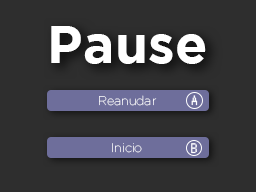
<style>
.page{position:relative;width:256px;height:192px;background:#2e2e2e}
.page>*{position:absolute;margin:0}
.t1{font:53.3px "Gotham-Bold";color:#ffffff}
.t2{font:12.5px "Gotham-Thin";color:#ffffff}
.t3{font:16.7px "Nintendo-DS-BIOS";color:#ffffff}
.t4{font:17.2px "Nintendo-DS-BIOS";color:#ffffff}
</style>
<div class="page">
<p class="t1" style="left:51px;top:26px;width:155px;height:38px">Pause</p>
<p class="t2" style="left:99px;top:95px;width:58px;height:11px">Reanudar</p>
<p class="t3" style="left:191px;top:95px;width:7px;height:11px">A</p>
<p class="t2" style="left:112px;top:143px;width:30px;height:10px">Inicio</p>
<p class="t4" style="left:191px;top:143px;width:6px;height:11px">B</p>
</div>
